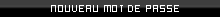
<style>
.page{position:relative;width:220px;height:17px;background:#000000}
.page>*{position:absolute;margin:0}
.t1{font:11px "hooge05_55Cyr";letter-spacing:0.01em;color:#ffffff}
</style>
<div class="page">
<p class="t1" style="left:51px;top:5px;width:128px;height:7px">nouveau   mOT   de   passe</p>
</div>
